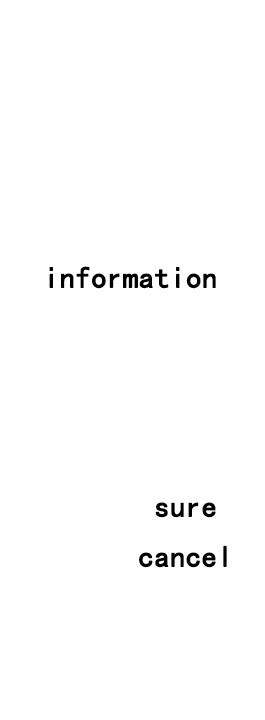
<style>
.page{position:relative;width:265px;height:720px;background:#ffffff}
.page>*{position:absolute;margin:0}
.t1{font:30px "SimHei";color:#000000;font-weight:bold}
.t2{font:30px/10px "SimHei";color:#000000;font-weight:bold}
</style>
<div class="page">
<p class="t1" style="left:49px;top:266px;width:167px;height:23px">information</p>
<p class="t2" style="left:139px;top:502px;width:88px;height:66px;text-align:center">sure<br><br><br><br><br>cancel</p>
</div>
